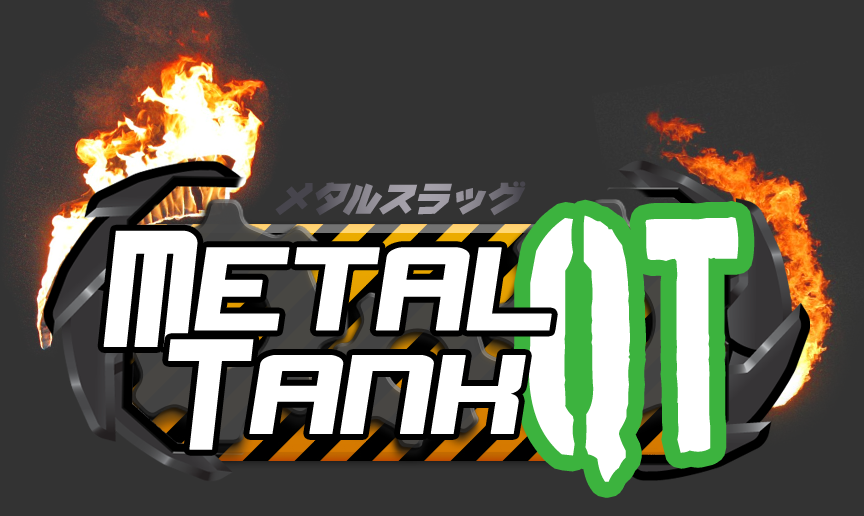
<style>
.page{position:relative;width:864px;height:516px;background:#333333}
.page>*{position:absolute;margin:0}
.t1{font:264.2px "BostonTraffic";letter-spacing:-0.025em;color:#ffffff;scale:0.74 1}
.t2{font:164.2px "NeverSayDie";letter-spacing:0.015em;color:#ffffff;font-weight:bold;scale:0.7 1}
.t3{font:156.1px "NeverSayDie";letter-spacing:0.015em;color:#ffffff;font-weight:bold;scale:0.73 1}
</style>
<div class="page">
<p class="t1" style="left:529px;top:215px;width:210px;height:267px">Qt</p>
<p class="t2" style="left:103px;top:230px;width:449px;height:117px">Metal</p>
<p class="t3" style="left:168px;top:339px;width:358px;height:111px">Tank</p>
</div>
